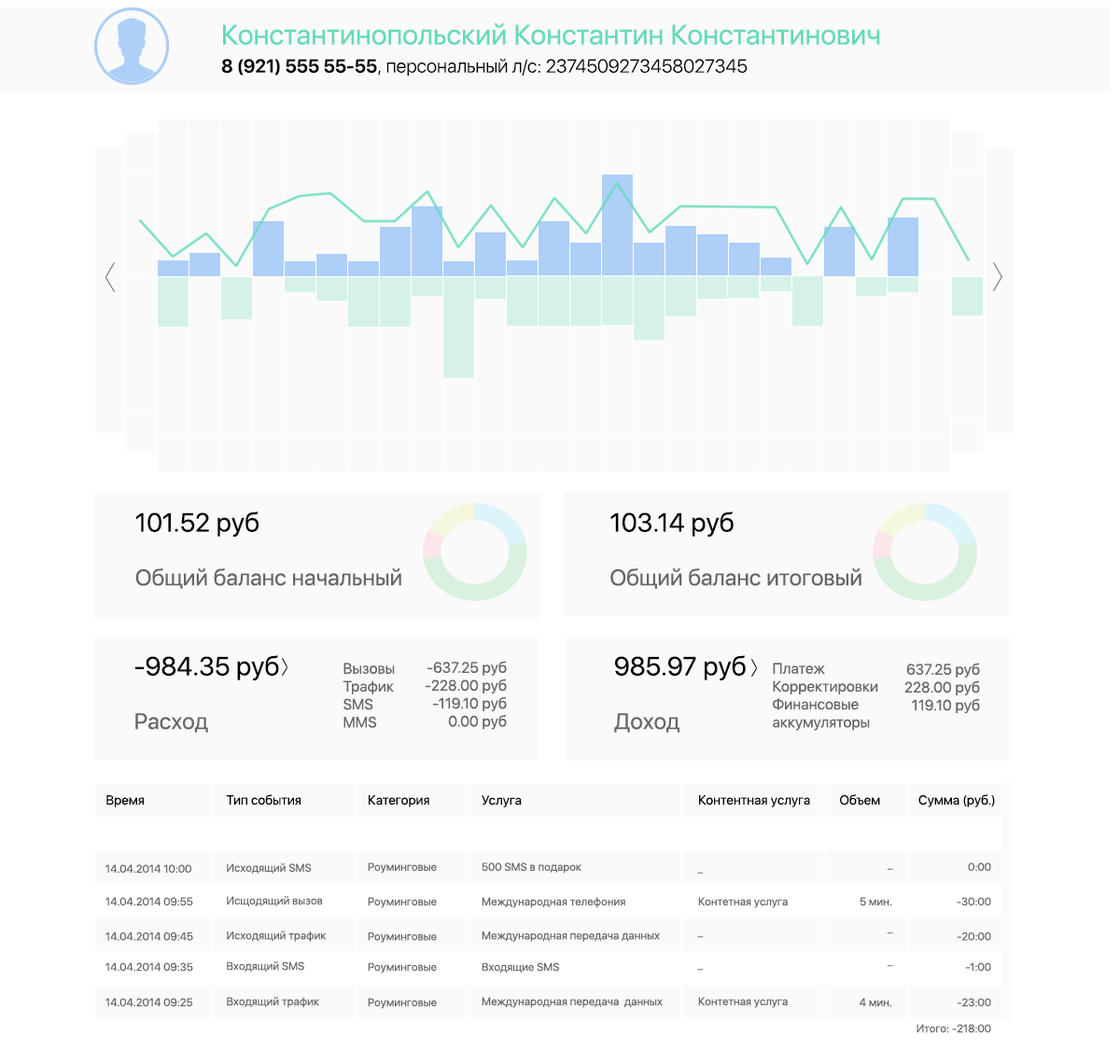
<style>
.page{position:relative;width:1120px;height:1064px;background:#fafafa}
.page>*{position:absolute;margin:0}
.t1{font:28px/33.6px "SFUIDisplay-Regular";color:#66daba}
.t2{font:18.7px/28px "SFUIDisplay-Semibold";color:#000000}
.t3{font:18.7px/28px "SFUIDisplay-Light";color:#000000}
.t4{font:22.4px "SFUIDisplay-Regular";color:#666666}
.t5{font:26.1px "SFUIDisplay-Regular";color:#000000}
.t6{font:26.1px "SFUIDisplay-Regular";color:#010101}
.t7{font:14.9px "SFUIDisplay-Regular";color:#666666}
.t8{font:13.1px "SFUIDisplay-Regular";color:#010101}
.t9{font:13.1px "SFUIDisplay-Regular";color:#000000}
.t10{font:11.2px "SFUIDisplay-Regular";color:#666666}
.t11{font:11.2px "SFUIDisplay-Regular"}
</style>
<div class="page">
<p class="t1" style="left:221px;top:23px;width:659px;height:54px">Константинопольский Константин Константинович<br><span class="t2">8 (921) 555 55-55</span><span class="t3">, персональный л/с: 2374509273458027345</span></p>
<p class="t4" style="left:135px;top:512px;width:266px;height:77px"><span class="t5">101.52 руб<br></span><br>Общий баланс начальный</p>
<p class="t4" style="left:611px;top:512px;width:251px;height:77px"><span class="t6">103.14 руб<br></span><br>Общий баланс итоговый</p>
<p class="t5" style="left:135px;top:655px;width:144px;height:78px">-984.35 руб<br><span class="t4"><br>Расход</span></p>
<p class="t7" style="left:343px;top:663px;width:52px;height:65px">Вызовы<br>Трафик<br>SMS<br>MMS</p>
<p class="t7" style="left:425px;top:661px;width:82px;height:69px;text-align:right">-637.25 руб<br>-228.00 руб<br>-119.10 руб<br>0.00 руб</p>
<p class="t6" style="left:614px;top:655px;width:132px;height:78px">985.97 руб<br><span class="t4"><br>Доход</span></p>
<p class="t7" style="left:773px;top:663px;width:106px;height:68px">Платеж<br>Корректировки <br>Финансовые аккумуляторы</p>
<p class="t7" style="left:905px;top:663px;width:75px;height:51px;text-align:right">637.25 руб<br>228.00 руб<br>119.10 руб</p>
<p class="t8" style="left:106px;top:795px;width:38px;height:13px">Время</p>
<p class="t9" style="left:226px;top:795px;width:75px;height:11px">Тип события</p>
<p class="t9" style="left:369px;top:795px;width:60px;height:13px">Категория</p>
<p class="t9" style="left:482px;top:795px;width:40px;height:13px">Услуга</p>
<p class="t9" style="left:699px;top:795px;width:111px;height:13px">Контентная услуга</p>
<p class="t9" style="left:840px;top:795px;width:40px;height:11px">Объем</p>
<p class="t9" style="left:919px;top:795px;width:76px;height:13px">Сумма (руб.)</p>
<p class="t10" style="left:105px;top:865px;width:86px;height:9px">14.04.2014 10:00</p>
<p class="t10" style="left:227px;top:863px;width:85px;height:11px">Исходящий SMS</p>
<p class="t10" style="left:368px;top:863px;width:69px;height:11px">Роуминговые</p>
<p class="t10" style="left:482px;top:863px;width:100px;height:11px">500 SMS в подарок</p>
<p class="t11" style="left:887px;top:868px;width:6px;height:2px">_</p>
<p class="t10" style="left:968px;top:863px;width:24px;height:9px">0:00</p>
<p class="t11" style="left:697px;top:872px;width:7px;height:2px">_</p>
<p class="t10" style="left:105px;top:897px;width:88px;height:10px">14.04.2014 09:55</p>
<p class="t10" style="left:227px;top:896px;width:96px;height:11px">Исщодящий вызов</p>
<p class="t10" style="left:368px;top:897px;width:69px;height:11px">Роуминговые</p>
<p class="t10" style="left:482px;top:897px;width:144px;height:11px">Международная телефония</p>
<p class="t10" style="left:698px;top:897px;width:90px;height:11px">Контетная услуга</p>
<p class="t10" style="left:860px;top:897px;width:33px;height:10px">5 мин.</p>
<p class="t10" style="left:957px;top:897px;width:35px;height:10px">-30:00</p>
<p class="t10" style="left:105px;top:932px;width:88px;height:9px">14.04.2014 09:45</p>
<p class="t10" style="left:227px;top:931px;width:100px;height:11px">Исходящий трафик</p>
<p class="t10" style="left:368px;top:933px;width:69px;height:10px">Роуминговые</p>
<p class="t10" style="left:482px;top:932px;width:178px;height:10px">Международная передача данных</p>
<p class="t11" style="left:697px;top:936px;width:7px;height:2px">_</p>
<p class="t11" style="left:887px;top:933px;width:6px;height:2px">_</p>
<p class="t10" style="left:957px;top:932px;width:35px;height:9px">-20:00</p>
<p class="t10" style="left:105px;top:963px;width:88px;height:9px">14.04.2014 09:35</p>
<p class="t10" style="left:227px;top:962px;width:77px;height:10px">Входящий SMS</p>
<p class="t10" style="left:368px;top:963px;width:69px;height:11px">Роуминговые</p>
<p class="t10" style="left:482px;top:963px;width:77px;height:10px">Входящие SMS</p>
<p class="t11" style="left:887px;top:965px;width:6px;height:2px">_</p>
<p class="t10" style="left:965px;top:963px;width:27px;height:9px">-1:00</p>
<p class="t11" style="left:697px;top:969px;width:7px;height:2px">_</p>
<p class="t10" style="left:105px;top:998px;width:88px;height:9px">14.04.2014 09:25</p>
<p class="t10" style="left:227px;top:997px;width:92px;height:11px">Входящий трафик</p>
<p class="t10" style="left:368px;top:998px;width:69px;height:11px">Роуминговые</p>
<p class="t10" style="left:482px;top:997px;width:181px;height:11px">Международная передача  данных</p>
<p class="t10" style="left:698px;top:997px;width:90px;height:11px">Контетная услуга</p>
<p class="t10" style="left:860px;top:998px;width:33px;height:9px">4 мин.</p>
<p class="t10" style="left:958px;top:998px;width:34px;height:9px">-23:00</p>
<p class="t10" style="left:917px;top:1024px;width:75px;height:10px">Итого: -218:00</p>
</div>
